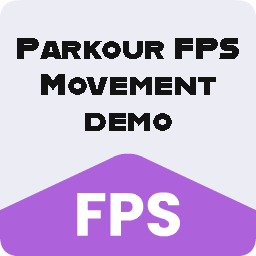
<style>
.page{position:relative;width:256px;height:256px;background:#ececf5}
.page>*{position:absolute;margin:0}
.t1{font:30px "Alfarn";letter-spacing:0.01em;color:#131313}
</style>
<div class="page">
<p class="t1" style="left:17px;top:38px;width:222px;height:93px;text-align:center">Parkour FPS<br>Movement<br>demo</p>
</div>
